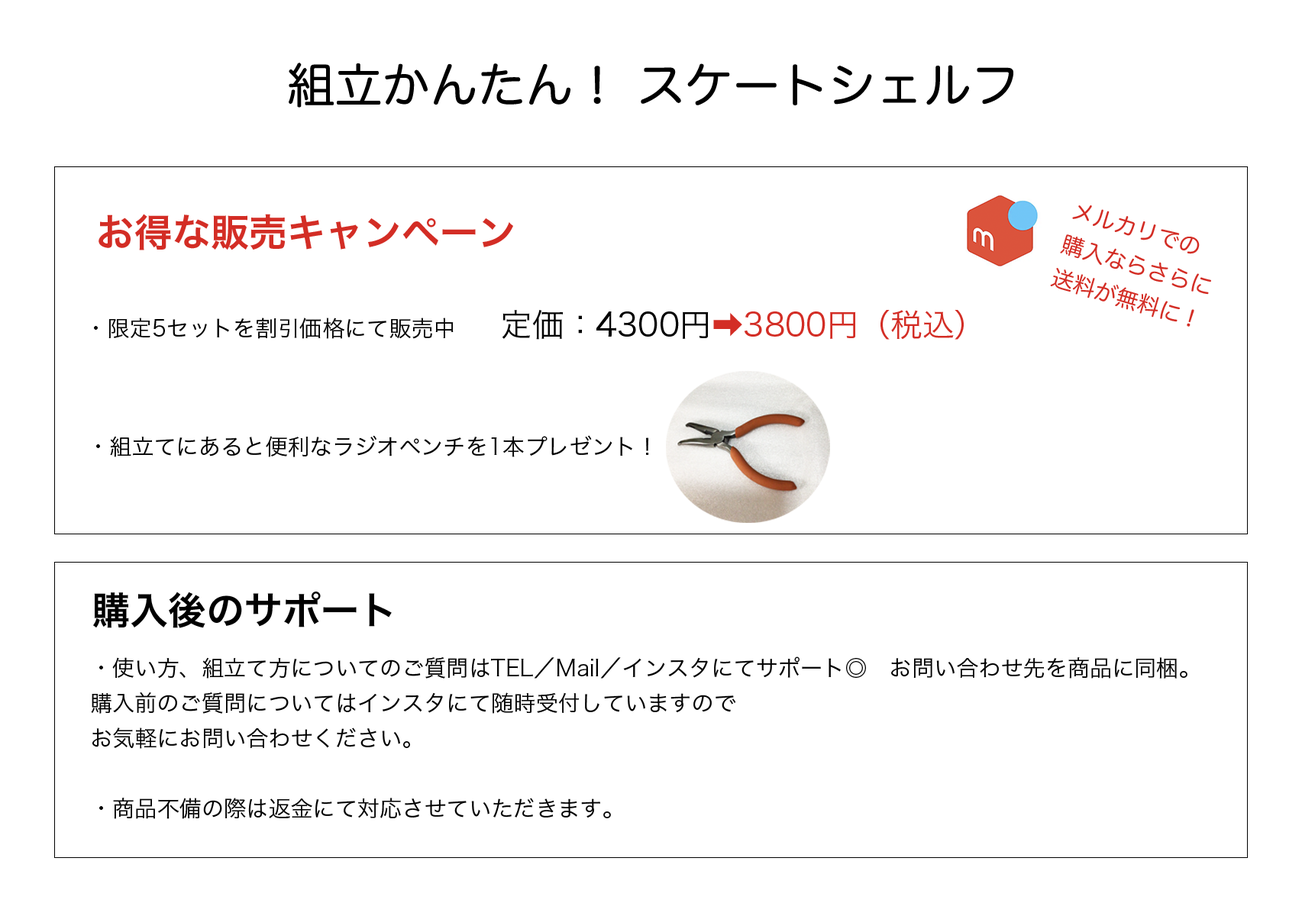
<style>
.page{position:relative;width:1302px;height:916px;background:#ffffff}
.page>*{position:absolute;margin:0}
.t1{font:47.7px "HiraMaruProN-W4";color:#000000}
.t2{font:22.3px/35px "HiraMaruProN-W4";color:#d32d25}
.t3{font:38.2px "HiraKakuProN-W6";color:#d32d25}
.t4{font:22.3px "HiraKakuProN-W3";color:#000000}
.t5{font:31.8px "HiraKakuProN-W3";color:#000000}
.t6{font:31.8px "HiraKakuProN-W3";color:#d32d25}
.t7{font:38.2px "HiraKakuProN-W6";color:#000000}
.t8{font:22.3px/35px "HiraKakuProN-W3";color:#000000}
</style>
<div class="page">
<p class="t1" style="left:289px;top:63px;width:724px;height:45px">組立かんたん！ スケートシェルフ</p>
<p class="t2" style="left:1050px;top:205px;width:161px;height:122px;rotate:17deg">メルカリでの<br>購入ならさらに<br>送料が無料に！</p>
<p class="t3" style="left:98px;top:214px;width:415px;height:36px">お得な販売キャンペーン</p>
<p class="t4" style="left:94px;top:310px;width:869px;height:30px">・限定5セットを割引価格にて販売中　　<span class="t5">定価：4300円</span><span class="t6">➡️3800円（税込）</span></p>
<p class="t4" style="left:96px;top:435px;width:553px;height:22px">・組立てにあると便利なラジオペンチを1本プレゼント！</p>
<p class="t7" style="left:93px;top:592px;width:299px;height:36px">購入後のサポート</p>
<p class="t8" style="left:91px;top:657px;width:1096px;height:162px">・使い方、組立て方についてのご質問はTEL／Mail／インスタにてサポート◎　お問い合わせ先を商品に同梱。<br>購入前のご質問についてはインスタにて随時受付していますので<br>お気軽にお問い合わせください。<br><br>・商品不備の際は返金にて対応させていただきます。</p>
</div>
